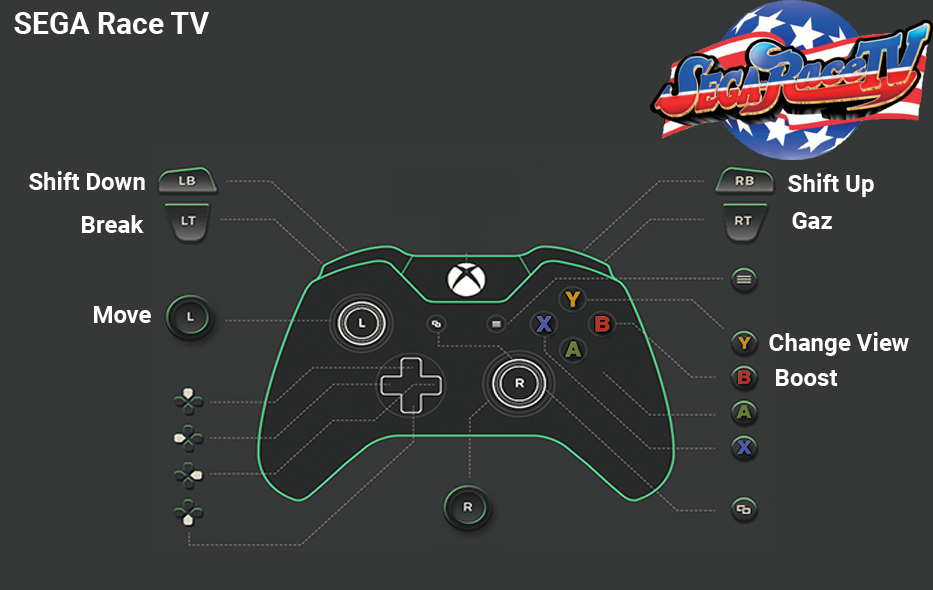
<style>
.page{position:relative;width:933px;height:590px;background:#363838}
.page>*{position:absolute;margin:0}
.t1{font:30px "Roboto-Bold";color:#ffffff}
.t2{font:24px "Roboto-Bold";color:#ffffff}
</style>
<div class="page">
<p class="t1" style="left:14px;top:12px;width:195px;height:22px">SEGA Race TV</p>
<p class="t2" style="left:29px;top:171px;width:116px;height:19px">Shift Down</p>
<p class="t2" style="left:788px;top:173px;width:86px;height:24px">Shift Up</p>
<p class="t2" style="left:82px;top:215px;width:62px;height:18px">Break</p>
<p class="t2" style="left:792px;top:212px;width:40px;height:17px">Gaz</p>
<p class="t2" style="left:94px;top:306px;width:57px;height:17px">Move</p>
<p class="t2" style="left:769px;top:332px;width:140px;height:24px">Change View</p>
<p class="t2" style="left:776px;top:369px;width:62px;height:17px">Boost</p>
</div>
